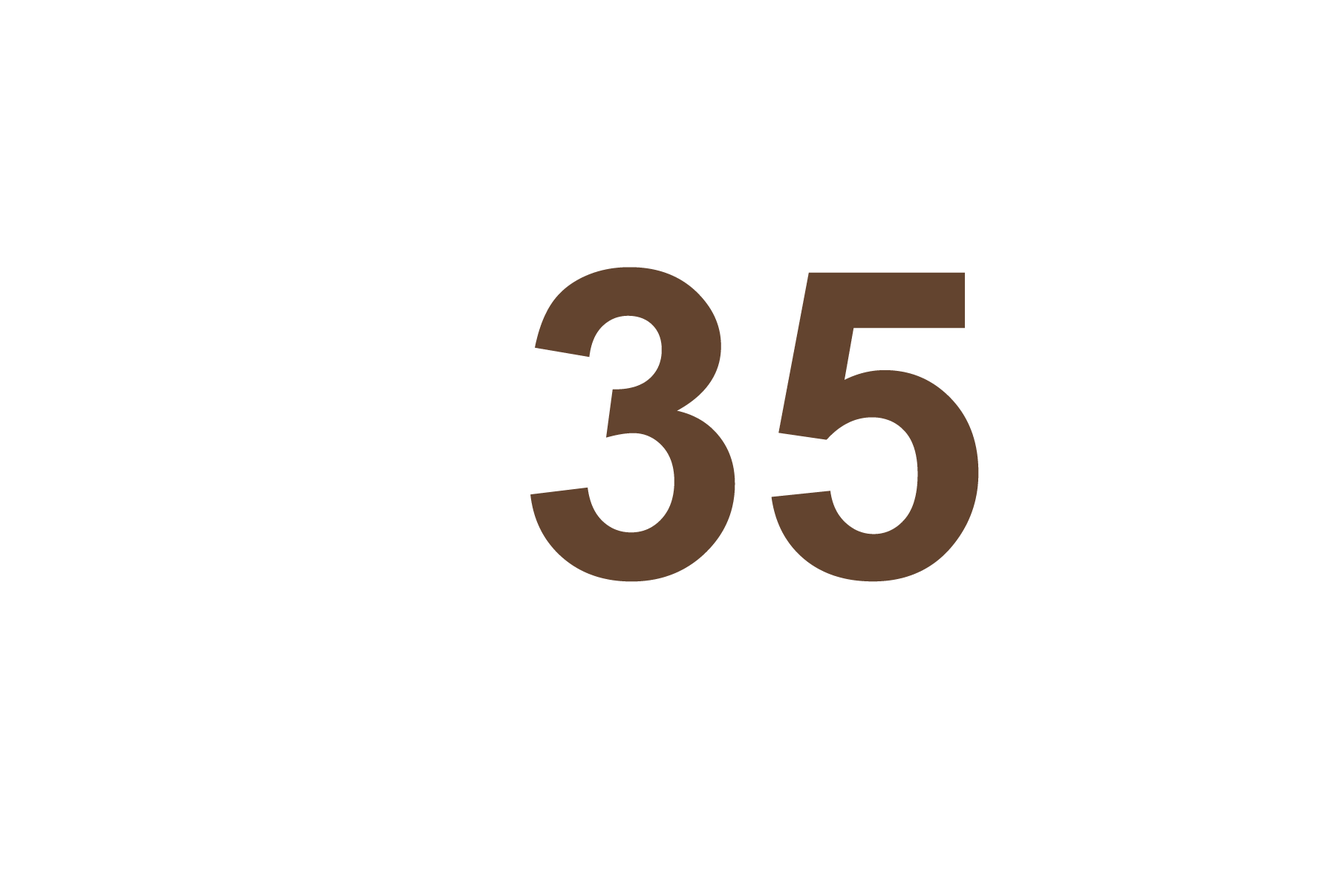
<style>
.page{position:relative;width:1337px;height:892px;background:#ffffff}
.page>*{position:absolute;margin:0}
.t1{font:429.6px "Arial-BoldMT";color:#63442f}
</style>
<div class="page">
<p class="t1" style="left:531px;top:267px;width:448px;height:315px">35</p>
</div>
